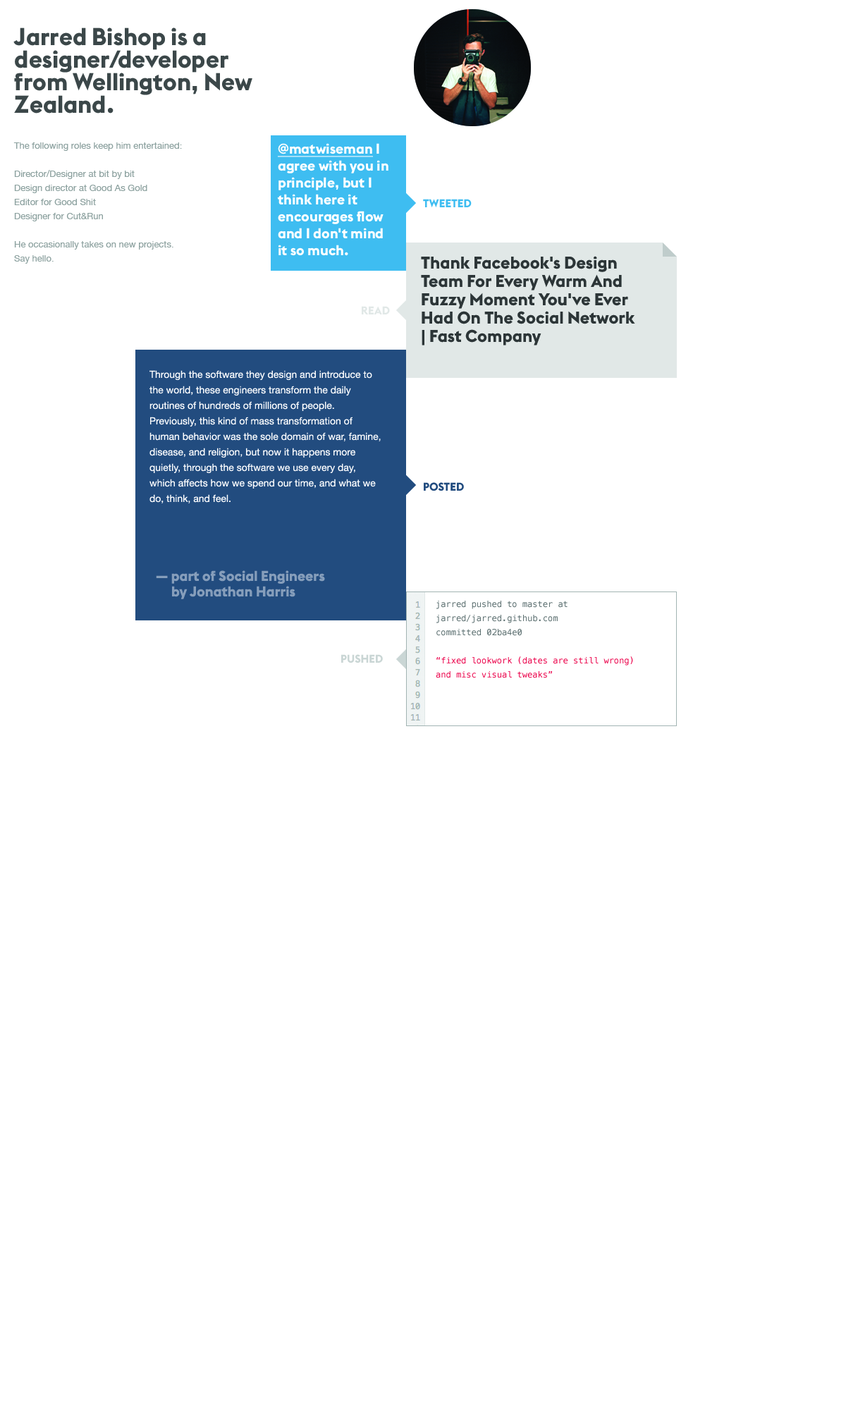
<style>
.page{position:relative;width:846px;height:1410px;background:#ffffff}
.page>*{position:absolute;margin:0}
.t1{font:24px/22.6px "EuclidBP-Bold";color:#3b4849}
.t2{font:9.2px/14.1px "HelveticaNeue";color:#8da1a0}
.t3{font:14.1px/16.9px "EuclidBP-Bold";color:#ffffff}
.t4{font:14.1px/16.9px "EuclidBP-Bold";color:#ffffff;text-decoration:underline}
.t5{font:11.3px "EuclidBP-Bold";color:#3ebdf1}
.t6{font:16.9px/18.3px "EuclidBP-Bold";color:#2c3537}
.t7{font:11.3px "EuclidBP-Bold";color:#e1e8e7}
.t8{font:9.9px/15.5px "HelveticaNeue";color:#ffffff}
.t9{font:11.3px "EuclidBP-Bold";color:#224c7f}
.t10{font:14.1px/15.5px "EuclidBP-Bold";color:#869ebb}
.t11{font:8.5px/14.1px "Menlo-Regular";color:#5e7172}
.t12{font:8.5px/14.1px "Menlo-Regular";color:#eb0049}
.t13{font:11.3px "EuclidBP-Bold";color:#cad6d5}
</style>
<div class="page">
<p class="t1" style="left:13px;top:27px;width:239px;height:86px">Jarred Bishop is a designer/developer from Wellington, New Zealand.</p>
<p class="t2" style="left:13px;top:142px;width:169px;height:122px">The following roles keep him entertained:<br><br>Director/Designer at bit by bit<br>Design director at Good As Gold<br>Editor for Good Shit<br>Designer for Cut&amp;Run<br><br>He occasionally takes on new projects.<br>Say hello.</p>
<p class="t3" style="left:277px;top:143px;width:111px;height:113px"><span class="t4">@matwiseman</span> I agree with you in principle, but I think here it encourages flow and I don't mind it so much.</p>
<p class="t5" style="left:423px;top:199px;width:49px;height:9px">TWEETED</p>
<p class="t6" style="left:421px;top:256px;width:214px;height:89px">Thank Facebook's Design Team For Every Warm And Fuzzy Moment You've Ever Had On The Social Network | Fast Company</p>
<p class="t7" style="left:362px;top:306px;width:28px;height:8px">READ</p>
<p class="t8" style="left:149px;top:370px;width:232px;height:134px">Through the software they design and introduce to the world, these engineers transform the daily routines of hundreds of millions of people. Previously, this kind of mass transformation of human behavior was the sole domain of war, famine, disease, and religion, but now it happens more quietly, through the software we use every day, which affects how we spend our time, and what we do, think, and feel.</p>
<p class="t9" style="left:424px;top:482px;width:40px;height:9px">POSTED</p>
<p class="t10" style="left:156px;top:570px;width:169px;height:29px">— part of Social Engineers<br>     by Jonathan Harris</p>
<p class="t11" style="left:436px;top:601px;width:197px;height:77px">jarred pushed to master at jarred/jarred.github.com<br>committed 02ba4e0 <br><br><span class="t12">“fixed lookwork (dates are still wrong) and misc visual tweaks”</span></p>
<p class="t13" style="left:341px;top:654px;width:42px;height:9px">PUSHED</p>
</div>
